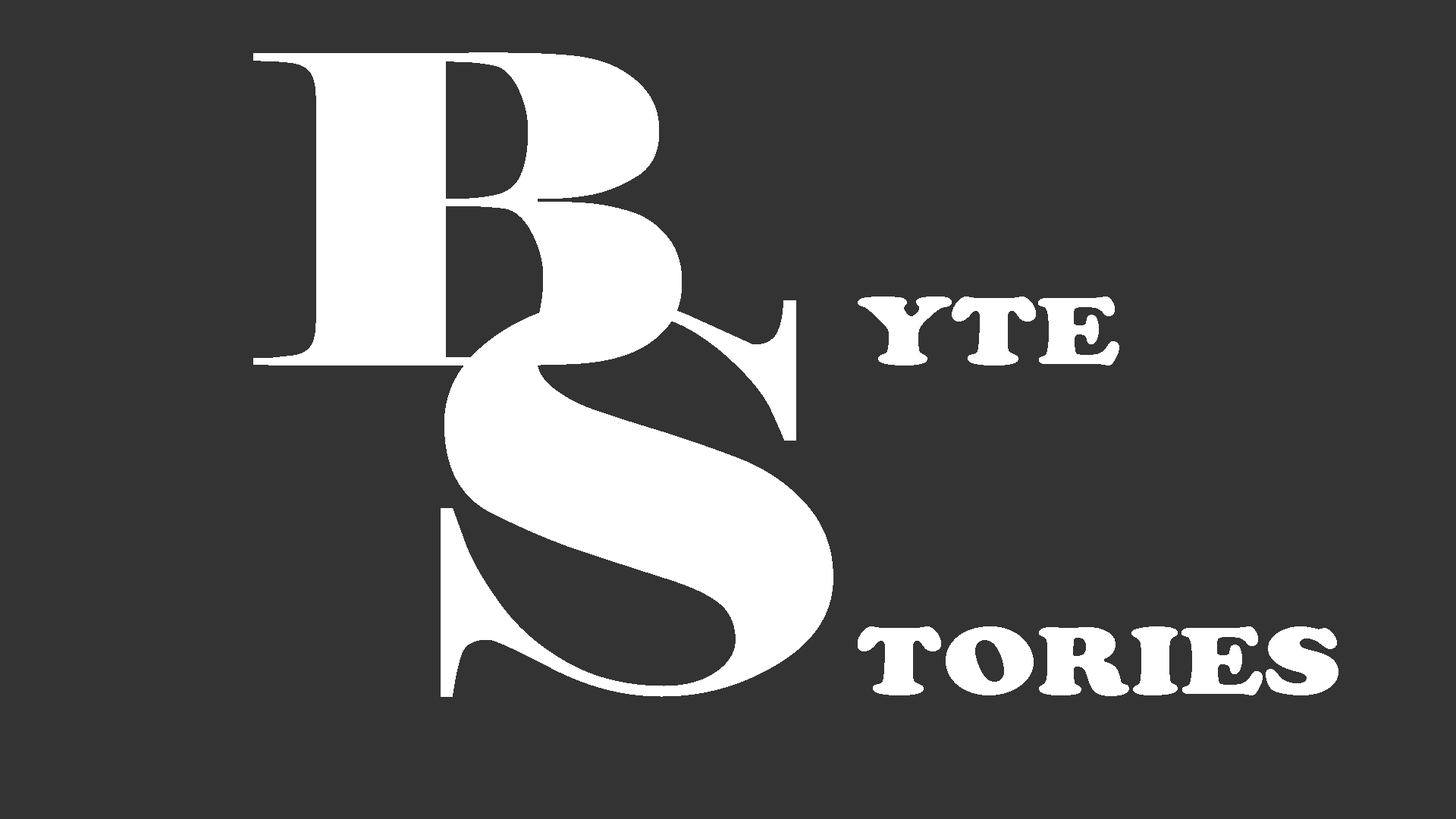
<style>
.page{position:relative;width:1456px;height:819px;background:#333333}
.page>*{position:absolute;margin:0}
.t1{font:427.7px "Elephant-Regular";color:#ffffff;scale:1.23 1}
.t2{font:527.1px "Elephant-Regular";color:#ffffff;scale:1.23 1}
.t3{font:98.3px "CooperBlack";color:#ffffff;scale:1.23 1}
</style>
<div class="page">
<p class="t1" style="left:253px;top:52px;width:429px;height:314px">B</p>
<p class="t2" style="left:441px;top:300px;width:392px;height:397px">S</p>
<p class="t3" style="left:858px;top:297px;width:261px;height:69px">YTE</p>
<p class="t3" style="left:858px;top:626px;width:480px;height:70px">TORIES</p>
</div>
